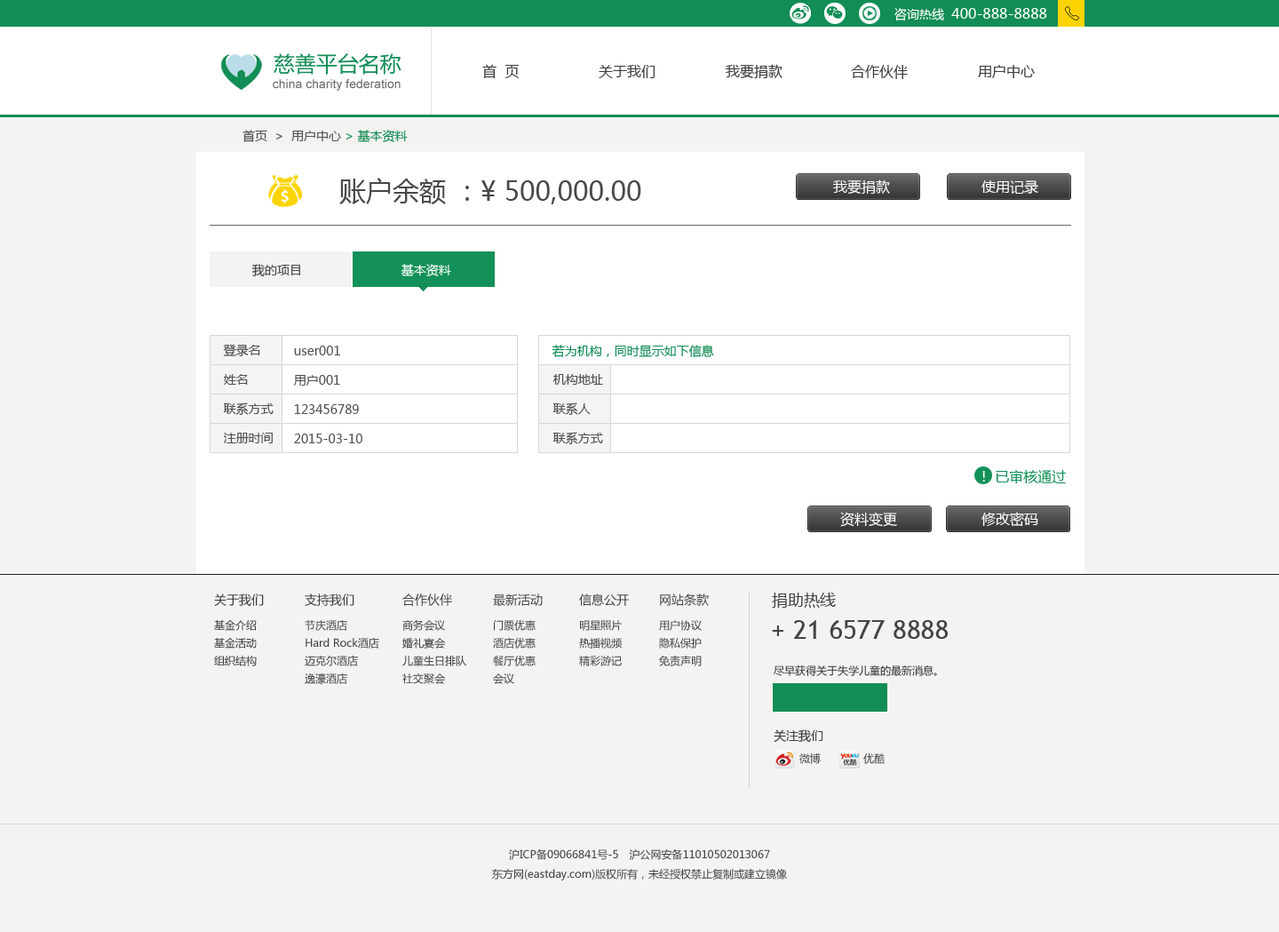
<style>
.page{position:relative;width:1279px;height:932px;background:#f5f3f1}
.page>*{position:absolute;margin:0}
.t1{font:14.2px "MicrosoftYaHei";color:#ffffff}
.t2{font:12.4px "MicrosoftYaHei";color:#ffffff}
.t3{font:21.3px "MicrosoftYaHei";color:#128d56}
.t4{font:14.2px "MicrosoftYaHei";color:#3c3a3b}
.t5{font:12.4px "ArialMT";color:#6c6c6c}
.t6{font:12.4px "MicrosoftYaHei";color:#128d56}
.t7{font:12.4px "MicrosoftYaHei";color:#505050}
.t8{font:12.4px "MicrosoftYaHei";color:#555555}
.t9{font:26.7px "MicrosoftYaHei";color:#494949}
.t10{font:12.4px/29.3px "MicrosoftYaHei";color:#505050}
.t11{font:14.2px "MicrosoftYaHei";color:#149159}
.t12{font:10.7px/17.8px "MicrosoftYaHei";color:#3a3a3a}
.t13{font:12.4px/26.7px "MicrosoftYaHei";color:#3a3a3a}
.t14{font:10.7px/17.8px "MicrosoftYaHei";color:#444444}
.t15{font:12.4px/26.7px "MicrosoftYaHei";color:#444444}
.t16{font:16px "MicrosoftYaHei";color:#444444}
.t17{font:26.7px "TrebuchetMS";color:#444444}
.t18{font:10.7px "MicrosoftYaHei";color:#323232}
.t19{font:12.4px "MicrosoftYaHei";color:#444444}
.t20{font:10.7px "MicrosoftYaHei";color:#444444}
.t21{font:10.7px/19.5px "MicrosoftYaHei";color:#444444}
</style>
<div class="page">
<p class="t1" style="left:895px;top:8px;width:153px;height:13px"><span class="t2">咨询热线  </span>400-888-8888</p>
<p class="t3" style="left:274px;top:53px;width:128px;height:22px">慈善平台名称</p>
<p class="t4" style="left:482px;top:64px;width:38px;height:15px">首  页</p>
<p class="t4" style="left:599px;top:65px;width:56px;height:13px">关于我们</p>
<p class="t4" style="left:726px;top:64px;width:57px;height:14px">我要捐款</p>
<p class="t4" style="left:851px;top:65px;width:57px;height:14px">合作伙伴</p>
<p class="t4" style="left:978px;top:65px;width:57px;height:13px">用户中心</p>
<p class="t5" style="left:273px;top:79px;width:128px;height:12px">china charity federation</p>
<p class="t6" style="left:243px;top:130px;width:165px;height:12px"><span class="t7">首页  &gt;  </span><span class="t8">用户中心</span> &gt; 基本资料</p>
<p class="t9" style="left:339px;top:178px;width:302px;height:26px">账户余额 ：¥ 500,000.00</p>
<p class="t1" style="left:833px;top:179px;width:57px;height:15px">我要捐款</p>
<p class="t1" style="left:982px;top:180px;width:57px;height:14px">使用记录</p>
<p class="t10" style="left:223px;top:344px;width:51px;height:99px">登录名<br>姓名<br>联系方式<br>注册时间</p>
<p class="t10" style="left:294px;top:346px;width:69px;height:97px">user001<br>用户001<br>123456789<br>2015-03-10</p>
<p class="t6" style="left:552px;top:345px;width:162px;height:12px">若为机构，同时显示如下信息</p>
<p class="t10" style="left:553px;top:374px;width:50px;height:70px">机构地址<br>联系人<br>联系方式</p>
<p class="t11" style="left:983px;top:470px;width:83px;height:13px"><span class="t1">！</span> 已审核通过</p>
<p class="t1" style="left:841px;top:512px;width:56px;height:15px">资料变更</p>
<p class="t1" style="left:982px;top:512px;width:57px;height:15px">修改密码</p>
<p class="t12" style="left:214px;top:594px;width:50px;height:72px"><span class="t13">关于我们 <br></span>基金介绍<br>基金活动<br>组织结构</p>
<p class="t14" style="left:305px;top:594px;width:74px;height:90px"><span class="t15">支持我们<br></span>节庆酒店<br>Hard Rock酒店<br>迈克尔酒店<br>逸濠酒店</p>
<p class="t14" style="left:402px;top:594px;width:64px;height:90px"><span class="t15">合作伙伴<br></span>商务会议<br>婚礼宴会<br>儿童生日排队<br>社交聚会</p>
<p class="t14" style="left:493px;top:594px;width:50px;height:90px"><span class="t15">最新活动<br></span>门票优惠<br>酒店优惠<br>餐厅优惠<br>会议</p>
<p class="t14" style="left:579px;top:594px;width:50px;height:72px"><span class="t15">信息公开<br></span>明星照片<br>热播视频<br>精彩游记</p>
<p class="t14" style="left:659px;top:594px;width:50px;height:72px"><span class="t15">网站条款<br></span>用户协议<br>隐私保护<br>免责声明</p>
<p class="t16" style="left:772px;top:593px;width:64px;height:15px">捐助热线</p>
<p class="t17" style="left:772px;top:620px;width:176px;height:19px">+ 21 6577 8888</p>
<p class="t18" style="left:774px;top:665px;width:163px;height:11px">尽早获得关于失学儿童的最新消息。</p>
<p class="t19" style="left:774px;top:729px;width:50px;height:14px">关注我们</p>
<p class="t20" style="left:800px;top:753px;width:21px;height:11px">微博</p>
<p class="t20" style="left:864px;top:753px;width:21px;height:11px">优酷</p>
<p class="t21" style="left:492px;top:848px;width:295px;height:32px;text-align:center">沪ICP备09066841号-5　沪公网安备11010502013067<br>东方网(eastday.com)版权所有，未经授权禁止复制或建立镜像</p>
</div>
